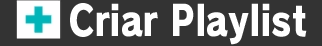
<style>
.page{position:relative;width:322px;height:46px;background:#333333}
.page>*{position:absolute;margin:0}
.t1{font:41.3px "RodinPro-EB";color:#ffffff;scale:0.85 1}
</style>
<div class="page">
<p class="t1" style="left:70px;top:3px;width:237px;height:42px">Criar Playlist</p>
</div>
